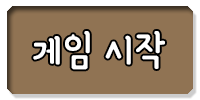
<style>
.page{position:relative;width:200px;height:100px;background:#907353}
.page>*{position:absolute;margin:0}
.t1{font:48.9px "YanoljaYacheR";color:#ffffff}
</style>
<div class="page">
<p class="t1" style="left:33px;top:31px;width:132px;height:39px">게임 시작</p>
</div>
